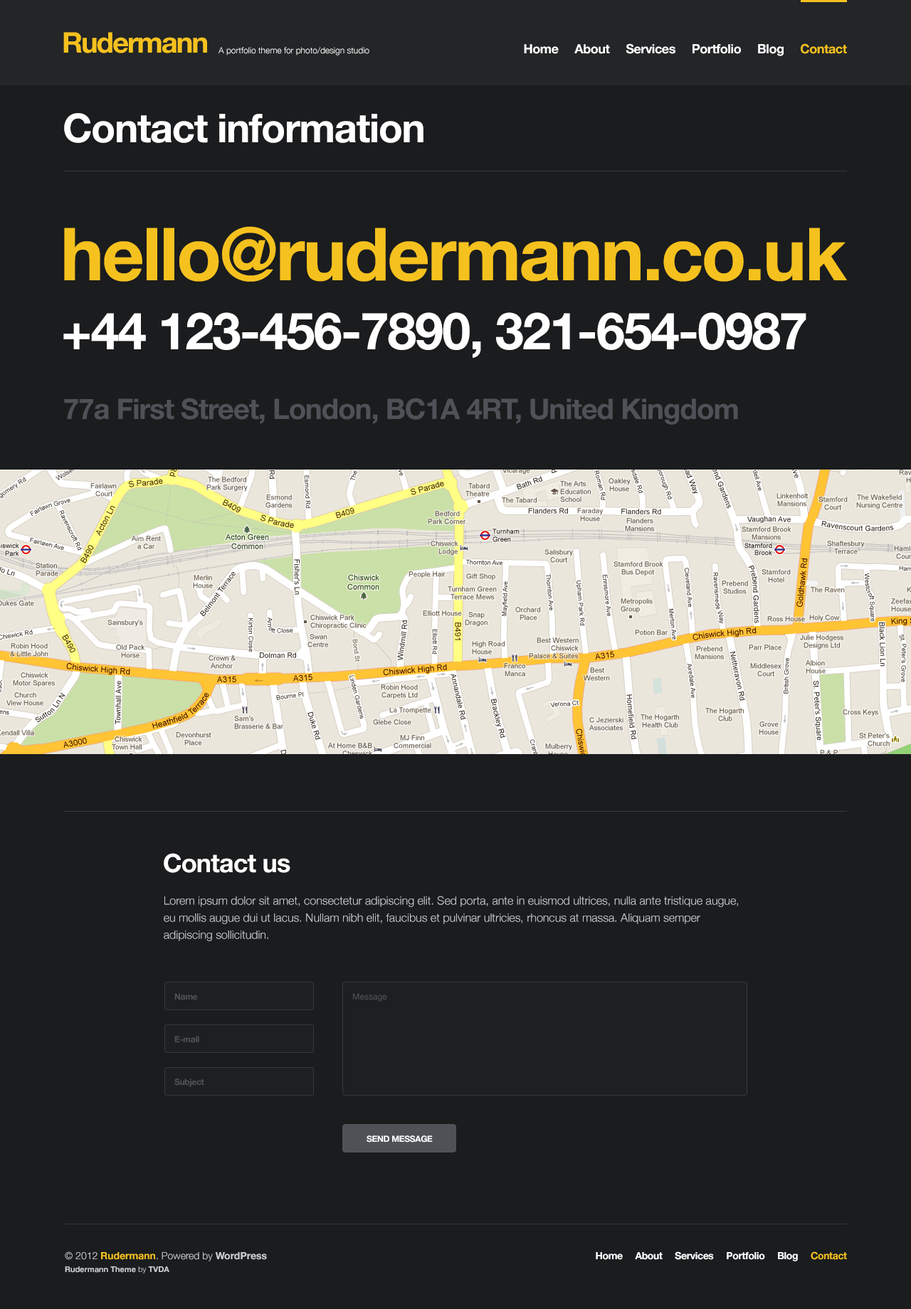
<style>
.page{position:relative;width:911px;height:1309px;background:#1a1c1e}
.page>*{position:absolute;margin:0}
.t1{font:28.5px "HelveticaNeue-Bold";letter-spacing:-0.05em;color:#f5c11e}
.t2{font:8.5px "HelveticaNeue-Light";color:#ffffff}
.t3{font:12.8px "HelveticaNeue-Bold";letter-spacing:-0.025em;color:#ffffff}
.t4{font:12.8px "HelveticaNeue-Bold";letter-spacing:-0.025em;color:#f5c11e}
.t5{font:39.8px "HelveticaNeue-Bold";letter-spacing:-0.025em;color:#ffffff}
.t6{font:73.3px "HelveticaNeue-Bold";letter-spacing:-0.025em;color:#f5c11e}
.t7{font:51.2px "HelveticaNeue-Bold";letter-spacing:-0.025em;color:#ffffff}
.t8{font:28.5px "HelveticaNeue-Bold";letter-spacing:-0.025em;color:#4e5257}
.t9{font:25.6px "HelveticaNeue-Bold";letter-spacing:-0.025em;color:#ffffff}
.t10{font:11.4px/17.1px "HelveticaNeue-Light";color:#ccced0}
.t11{font:8.5px "HelveticaNeue-Bold";letter-spacing:-0.025em;color:#4e5257}
.t12{font:8.5px "HelveticaNeue";color:#4e5257}
.t13{font:8.5px "HelveticaNeue-Bold";letter-spacing:-0.025em;color:#ffffff;text-transform:uppercase}
.t14{font:7.8px/12.8px "HelveticaNeue-Bold";color:#ccced0}
.t15{font:10px/12.8px "HelveticaNeue-Light";color:#ccced0}
.t16{font:10px/12.8px "HelveticaNeue-Bold";color:#f5c11e}
.t17{font:10px/12.8px "HelveticaNeue-Bold";color:#ccced0}
.t18{font:7.8px/12.8px "HelveticaNeue-Light";color:#ccced0}
.t19{font:10px "HelveticaNeue-Bold";letter-spacing:-0.025em;color:#ffffff}
.t20{font:10px "HelveticaNeue-Bold";letter-spacing:-0.025em;color:#f5c11e}
</style>
<div class="page">
<p class="t1" style="left:63px;top:32px;width:144px;height:21px">Rudermann</p>
<p class="t2" style="left:218px;top:47px;width:151px;height:9px">A portfolio theme for photo/design studio</p>
<p class="t3" style="left:524px;top:43px;width:323px;height:13px">Home     About     Services     Portfolio     Blog     <span class="t4">Contact</span></p>
<p class="t5" style="left:64px;top:113px;width:359px;height:30px">Contact information</p>
<p class="t6" style="left:64px;top:226px;width:783px;height:56px">hello@rudermann.co.uk</p>
<p class="t7" style="left:63px;top:312px;width:743px;height:46px">+44 123-456-7890, 321-654-0987</p>
<p class="t8" style="left:64px;top:398px;width:674px;height:27px">77a First Street, London, BC1A 4RT, United Kingdom</p>
<p class="t9" style="left:164px;top:853px;width:126px;height:20px">Contact us</p>
<p class="t10" style="left:164px;top:896px;width:574px;height:45px">Lorem ipsum dolor sit amet, consectetur adipiscing elit. Sed porta, ante in euismod ultrices, nulla ante tristique augue, eu mollis augue dui ut lacus. Nullam nibh elit, faucibus et pulvinar ultricies, rhoncus at massa. Aliquam semper adipiscing sollicitudin.</p>
<p class="t11" style="left:174px;top:993px;width:24px;height:7px">Name</p>
<p class="t12" style="left:353px;top:993px;width:34px;height:9px">Message</p>
<p class="t11" style="left:174px;top:1036px;width:25px;height:7px">E-mail</p>
<p class="t11" style="left:174px;top:1079px;width:30px;height:8px">Subject</p>
<p class="t13" style="left:366px;top:1136px;width:67px;height:7px">Send Message</p>
<p class="t14" style="left:65px;top:1252px;width:202px;height:22px"><span class="t15">© 2012 </span><span class="t16">Rudermann</span><span class="t15">. Powered by </span><span class="t17">WordPress<br></span>Rudermann Theme<span class="t18"> by </span>TVDA</p>
<p class="t19" style="left:596px;top:1252px;width:251px;height:10px">Home     About     Services     Portfolio     Blog    <span class="t20"> Contact</span></p>
</div>
